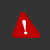
<style>
.page{position:relative;width:50px;height:50px;background:#333333}
.page>*{position:absolute;margin:0}
.t1{font:21.6px "BellMTBold";letter-spacing:-0.075em;color:#ffffff;scale:1.12 1}
</style>
<div class="page">
<p class="t1" style="left:22px;top:20px;width:6px;height:15px">!</p>
</div>
